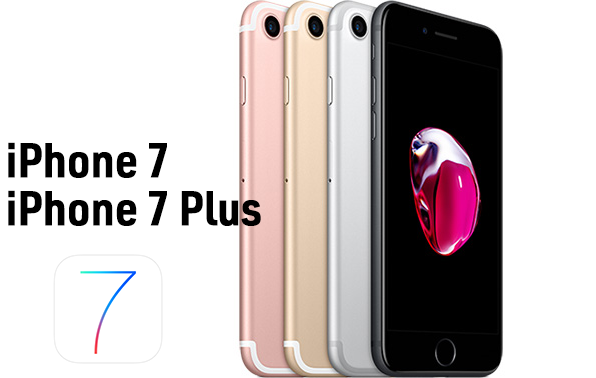
<style>
.page{position:relative;width:596px;height:378px;background:#ffffff}
.page>*{position:absolute;margin:0}
.t1{font:48px/48px "URWDINSemiCond-Bold";color:#000000}
</style>
<div class="page">
<p class="t1" style="left:8px;top:142px;width:253px;height:84px">iPhone 7<br>iPhone 7 Plus</p>
</div>
